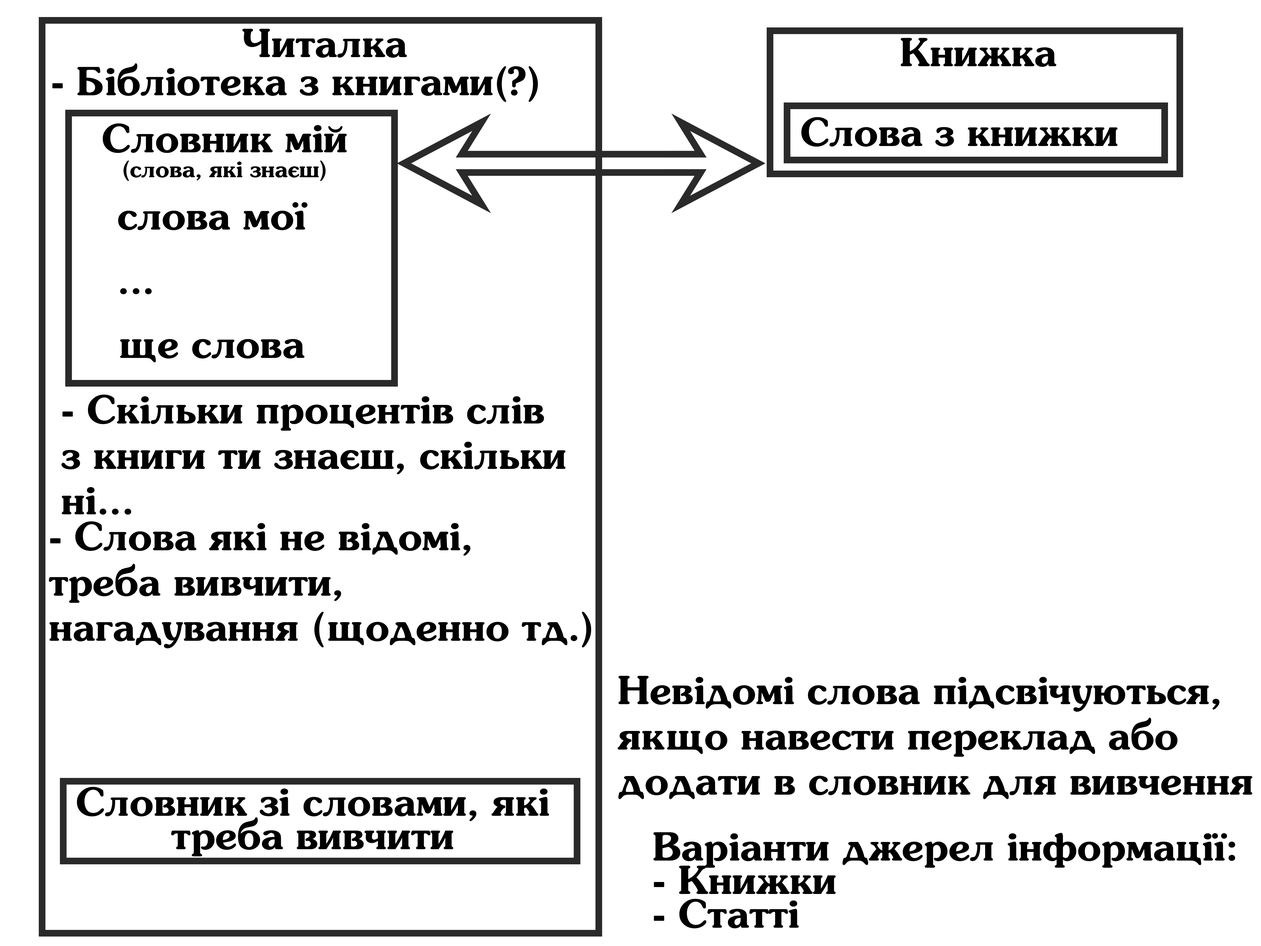
<style>
.page{position:relative;width:1261px;height:946px;background:#ffffff}
.page>*{position:absolute;margin:0}
.t1{font:39.4px "SouvenirLtBTRusbyme-Demi";color:#000000}
.t2{font:22.7px/25.1px "SouvenirLtBTRusbyme-Demi";color:#000000}
.t3{font:39.4px/64.2px "SouvenirLtBTRusbyme-Demi";color:#000000}
.t4{font:39.4px/45.3px "SouvenirLtBTRusbyme-Demi";color:#000000}
.t5{font:39.4px/33.6px "SouvenirLtBTRusbyme-Demi";color:#000000}
</style>
<div class="page">
<p class="t1" style="left:242px;top:29px;width:165px;height:29px">Читалка</p>
<p class="t1" style="left:901px;top:38px;width:155px;height:29px">Книжка</p>
<p class="t1" style="left:52px;top:63px;width:486px;height:39px">- Бібліотека з книгами(?)</p>
<p class="t2" style="left:103px;top:123px;width:244px;height:58px;text-align:center"><span class="t3">Словник мій<br></span>(слова, які знаєш)</p>
<p class="t1" style="left:801px;top:117px;width:316px;height:30px">Слова з книжки</p>
<p class="t3" style="left:118px;top:202px;width:190px;height:161px">слова мої<br>...<br>ще слова</p>
<p class="t4" style="left:61px;top:394px;width:505px;height:120px">- Скільки процентів слів <br>з книги ти знаєш, скільки <br>ні...</p>
<p class="t4" style="left:49px;top:521px;width:542px;height:127px">- Слова які не відомі, <br>треба вивчити, <br>нагадування (щоденно тд.)</p>
<p class="t4" style="left:618px;top:676px;width:634px;height:123px">Невідомі слова підсвічуються,<br>якщо навести переклад або <br>додати в словник для вивчення</p>
<p class="t5" style="left:77px;top:786px;width:472px;height:70px;text-align:center">Словник зі словами, які треба вивчити</p>
<p class="t5" style="left:653px;top:832px;width:582px;height:96px">Варіанти джерел інформації:<br>- Книжки<br>- Статті</p>
</div>
